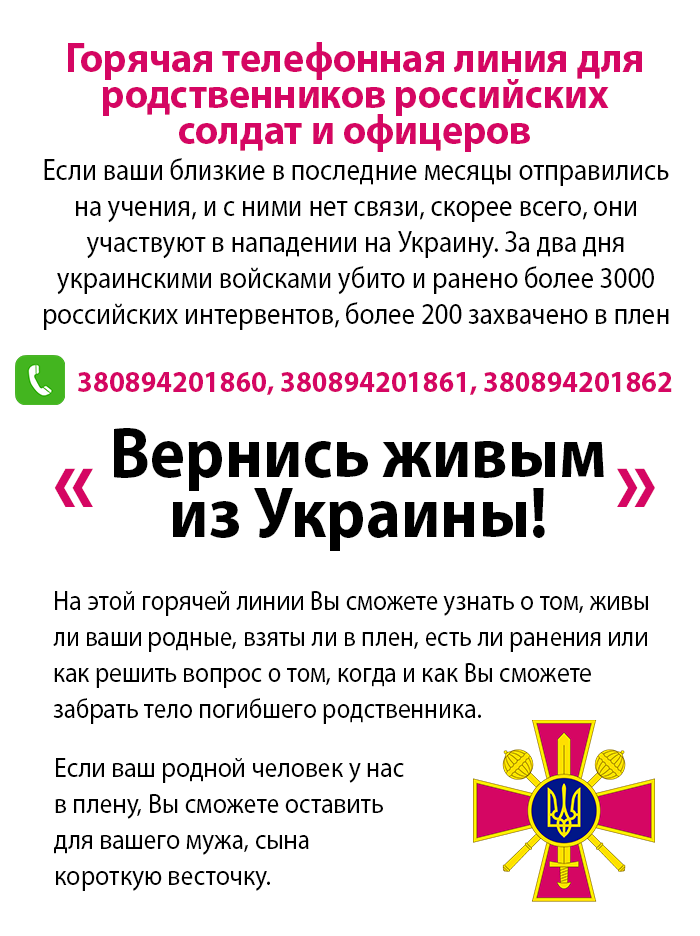
<style>
.page{position:relative;width:700px;height:936px;background:#ffffff}
.page>*{position:absolute;margin:0}
.t1{font:42px/36px "MyriadPro-Bold";color:#d50663;scale:0.95 1}
.t2{font:30px/36px "MyriadPro-Regular";color:#000000;scale:0.9 1}
.t3{font:30px "MyriadPro-Bold";color:#d50663;scale:0.95 1}
.t4{font:72px/60px "MyriadPro-Bold";color:#000000;scale:0.92 1}
.t5{font:100px "MyriadPro-Bold";color:#d50663;scale:0.92 1}
.t6{font:28px/36px "MyriadPro-Regular";color:#000000;scale:0.9 1}
.t7{font:28px/36px "MyriadPro-Regular";color:#000000;scale:0.92 1}
</style>
<div class="page">
<p class="t1" style="left:68px;top:42px;width:574px;height:110px;text-align:center">Горячая телефонная линия для родственников российских<br>солдат и офицеров</p>
<p class="t2" style="left:44px;top:158px;width:625px;height:172px;text-align:center">Если ваши близкие в последние месяцы отправились на учения, и с ними нет связи, скорее всего, они участвуют в нападении на Украину. За два дня украинскими войсками убито и ранено более 3000 российских интервентов, более 200 захвачено в плен</p>
<p class="t3" style="left:78px;top:372px;width:594px;height:23px">380894201860, 380894201861, 380894201862</p>
<p class="t4" style="left:114px;top:428px;width:490px;height:123px;text-align:center">Вернись живым из Украины!</p>
<p class="t5" style="left:54px;top:468px;width:601px;height:39px">«                            »</p>
<p class="t6" style="left:53px;top:591px;width:595px;height:133px">На этой горячей линии Вы сможете узнать о том, живы ли ваши родные, взяты ли в плен, есть ли ранения или как решить вопрос о том, когда и как Вы сможете забрать тело погибшего родственника.</p>
<p class="t7" style="left:54px;top:758px;width:350px;height:133px">Если ваш родной человек у нас в плену, Вы сможете оставить для вашего мужа, сына короткую весточку.</p>
</div>
